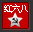
<style>
.page{position:relative;width:33px;height:32px;background:#c50000}
.page>*{position:absolute;margin:0}
.t1{font:10.4px "SimSun";letter-spacing:-0.25em;color:#ffffff}
</style>
<div class="page">
<p class="t1" style="left:4px;top:4px;width:24px;height:9px">红六八</p>
</div>
